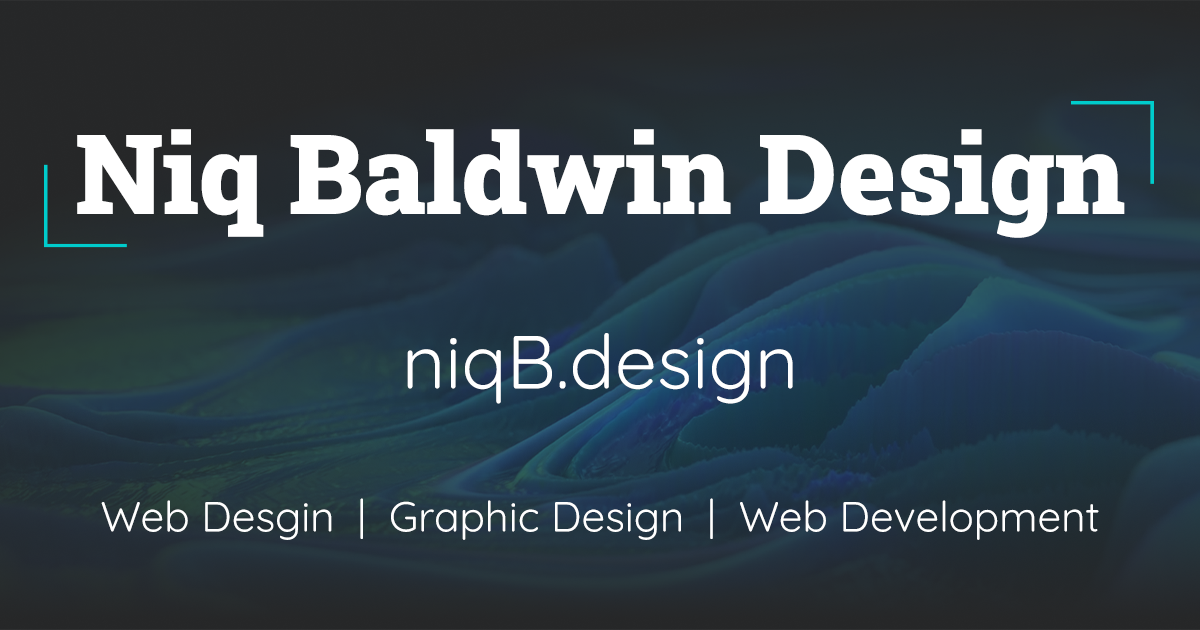
<style>
.page{position:relative;width:1200px;height:630px}
.page>*{position:absolute;margin:0}
.t1{font:110.9px "RobotoSlab-Black";color:#ffffff}
.t2{font:75px "Quicksand-Regular";color:#ffffff}
.t3{font:42px "Quicksand-Regular";color:#ffffff}
</style>
<div class="page">
<p class="t1" style="left:77px;top:129px;width:1048px;height:109px">Niq Baldwin Design</p>
<p class="t2" style="left:407px;top:333px;width:386px;height:71px">niqB.design</p>
<p class="t3" style="left:101px;top:498px;width:998px;height:42px">Web Desgin  |  Graphic Design  |  Web Development</p>
</div>
